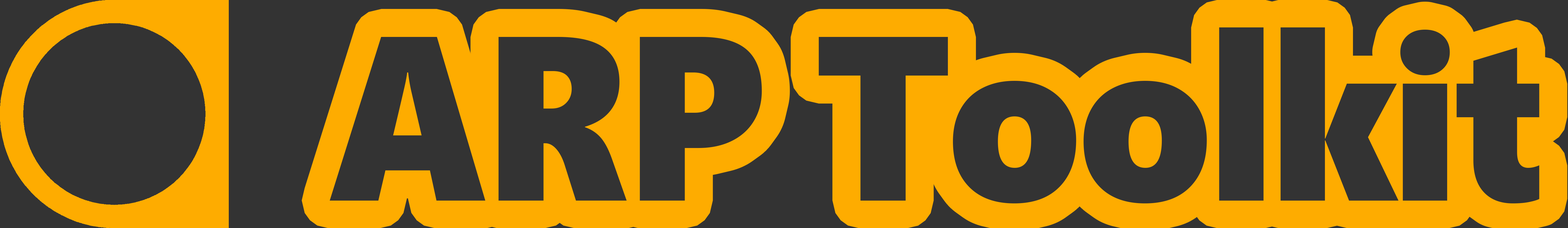
<style>
.page{position:relative;width:1568px;height:228px;background:#333333}
.page>*{position:absolute;margin:0}
.t1{font:234.5px "SegoeUIBlack";letter-spacing:-0.02em;color:#333333;scale:0.91 1}
</style>
<div class="page">
<p class="t1" style="left:330px;top:27px;width:1209px;height:177px">ARP Toolkit</p>
</div>
